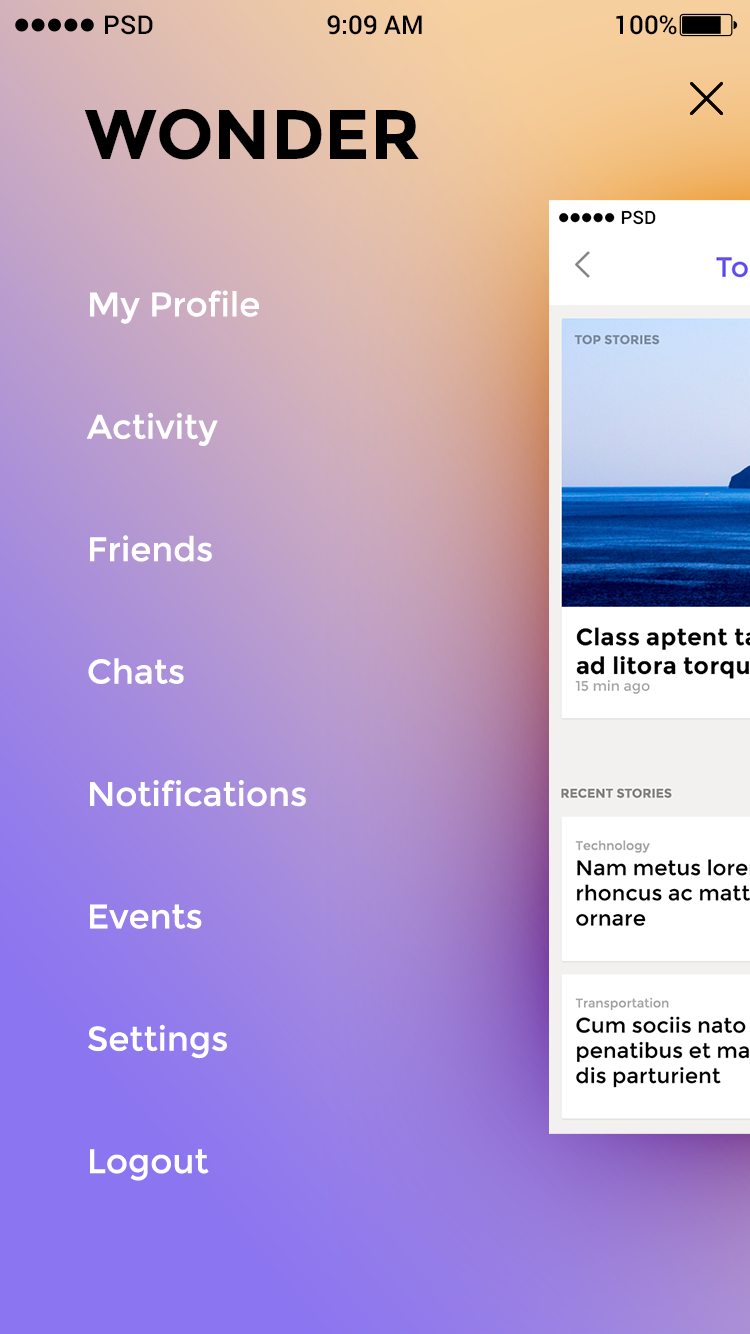
<style>
.page{position:relative;width:750px;height:1334px}
.page>*{position:absolute;margin:0}
.t1{font:26px "Roboto-Medium";color:#000000}
.t2{font:70px "Montserrat-Bold";color:#000000;text-transform:uppercase}
.t3{font:34px "Montserrat-Regular";color:#ffffff}
</style>
<div class="page">
<p class="t1" style="left:105px;top:15px;width:48px;height:20px">PSD</p>
<p class="t1" style="left:327px;top:15px;width:95px;height:20px">9:09 AM</p>
<p class="t1" style="left:616px;top:15px;width:61px;height:20px">100%</p>
<p class="t2" style="left:84px;top:109px;width:335px;height:51px">Wonder</p>
<p class="t3" style="left:86px;top:290px;width:220px;height:891px">My Profile<br><br><br>Activity<br><br><br>Friends<br><br><br>Chats<br><br><br>Notifications<br><br><br>Events<br><br><br>Settings<br><br><br>Logout</p>
</div>
